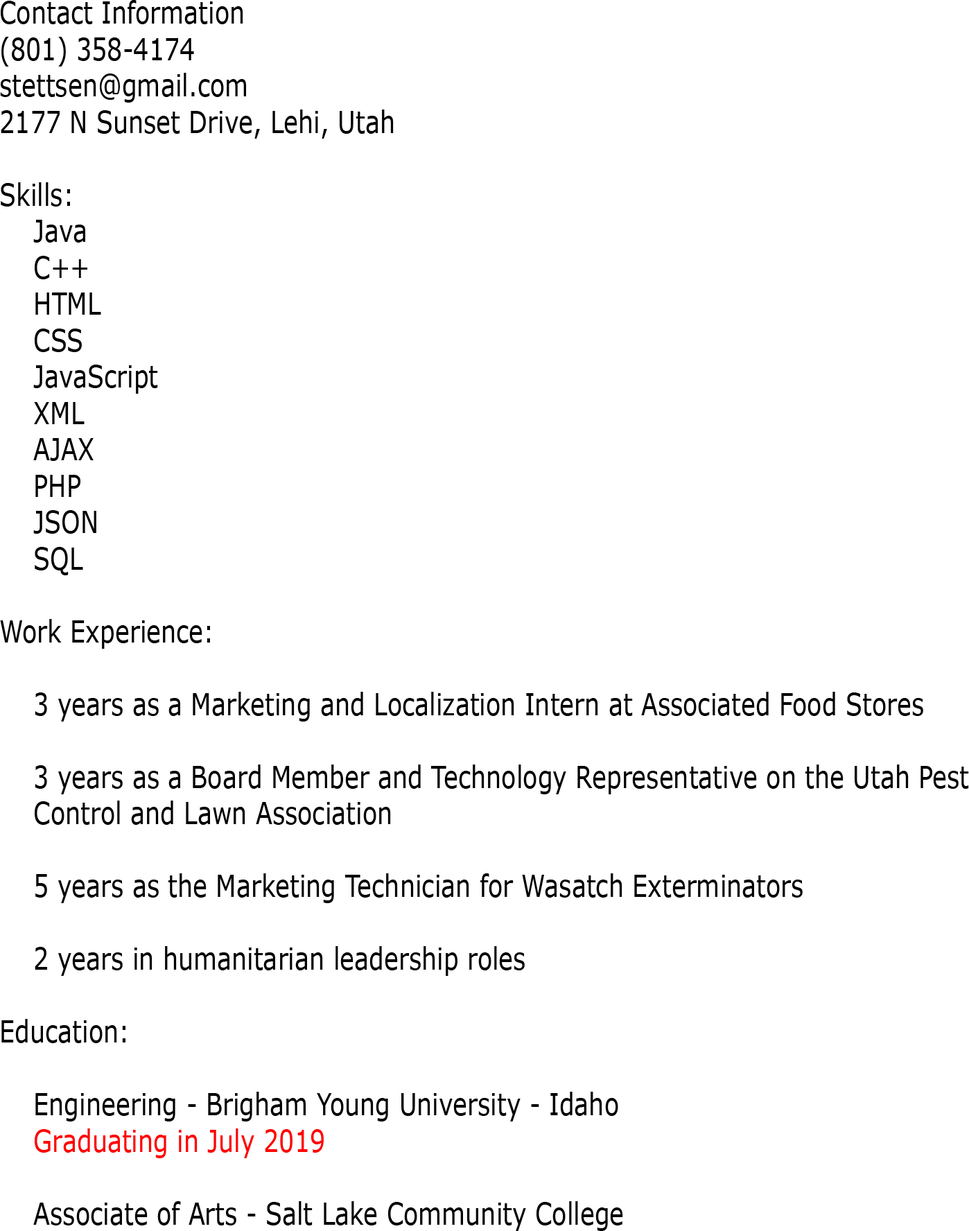
<style>
.page{position:relative;width:969px;height:1231px;background:#ffffff}
.page>*{position:absolute;margin:0}
.t1{font:30.3px "Verdana";color:#000000;scale:0.8 1}
.t2{font:30.3px "Verdana";color:#ff0000;scale:0.8 1}
</style>
<div class="page">
<p class="t1" style="left:0px;top:0px;width:969px;height:1231px">Contact Information<br>(801) 358-4174<br>stettsen@gmail.com<br>2177 N Sunset Drive, Lehi, Utah<br><br>Skills:<br>    Java<br>    C++<br>    HTML<br>    CSS<br>    JavaScript<br>    XML<br>    AJAX<br>    PHP<br>    JSON<br>    SQL<br><br>Work Experience:<br><br>    3 years as a Marketing and Localization Intern at Associated Food Stores<br><br>    3 years as a Board Member and Technology Representative on the Utah Pest<br>    Control and Lawn Association<br><br>    5 years as the Marketing Technician for Wasatch Exterminators<br><br>    2 years in humanitarian leadership roles<br><br>Education:<br><br>    Engineering - Brigham Young University - Idaho<br>    <span class="t2">Graduating in July 2019<br><br></span>    Associate of Arts - Salt Lake Community College</p>
</div>
